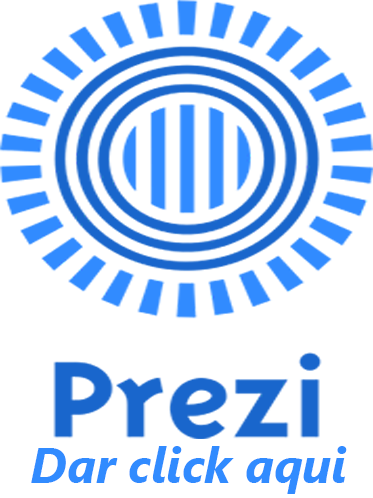
<style>
.page{position:relative;width:373px;height:498px;background:#ffffff}
.page>*{position:absolute;margin:0}
.t1{font:48.6px "SegoeUI-BoldItalic";color:#318bff}
</style>
<div class="page">
<p class="t1" style="left:31px;top:446px;width:316px;height:48px">Dar click aqui</p>
</div>
